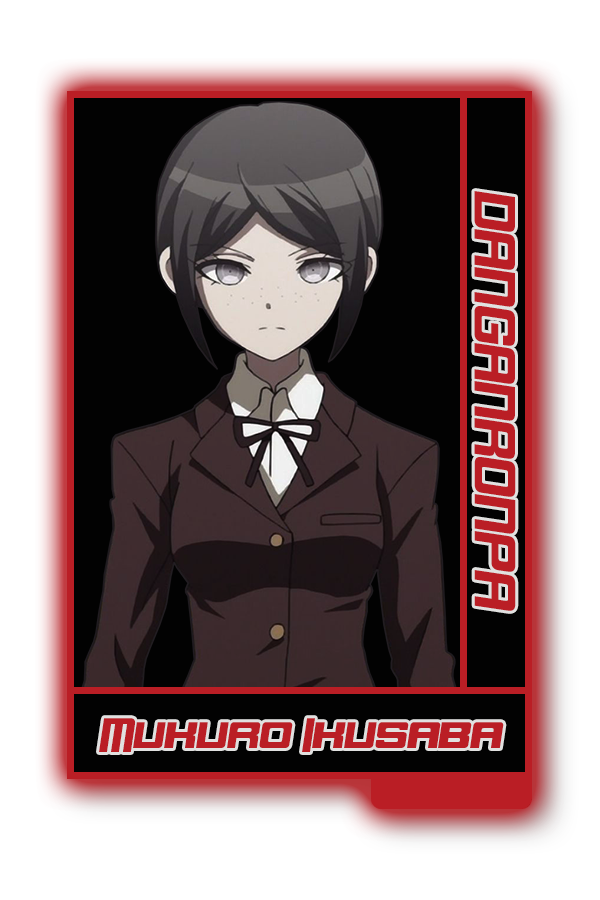
<style>
.page{position:relative;width:600px;height:900px;background:#020202}
.page>*{position:absolute;margin:0}
.t1{font:48.8px "DorBlue";color:#bb2c2e}
.t2{font:40.6px "DorBlue";color:#bb2c2e}
</style>
<div class="page">
<p class="t1" style="left:474px;top:191px;width:42px;height:420px;rotate:90deg">DANGANRONPA</p>
<p class="t2" style="left:99px;top:718px;width:405px;height:34px">Mukuro Ikusaba</p>
</div>
